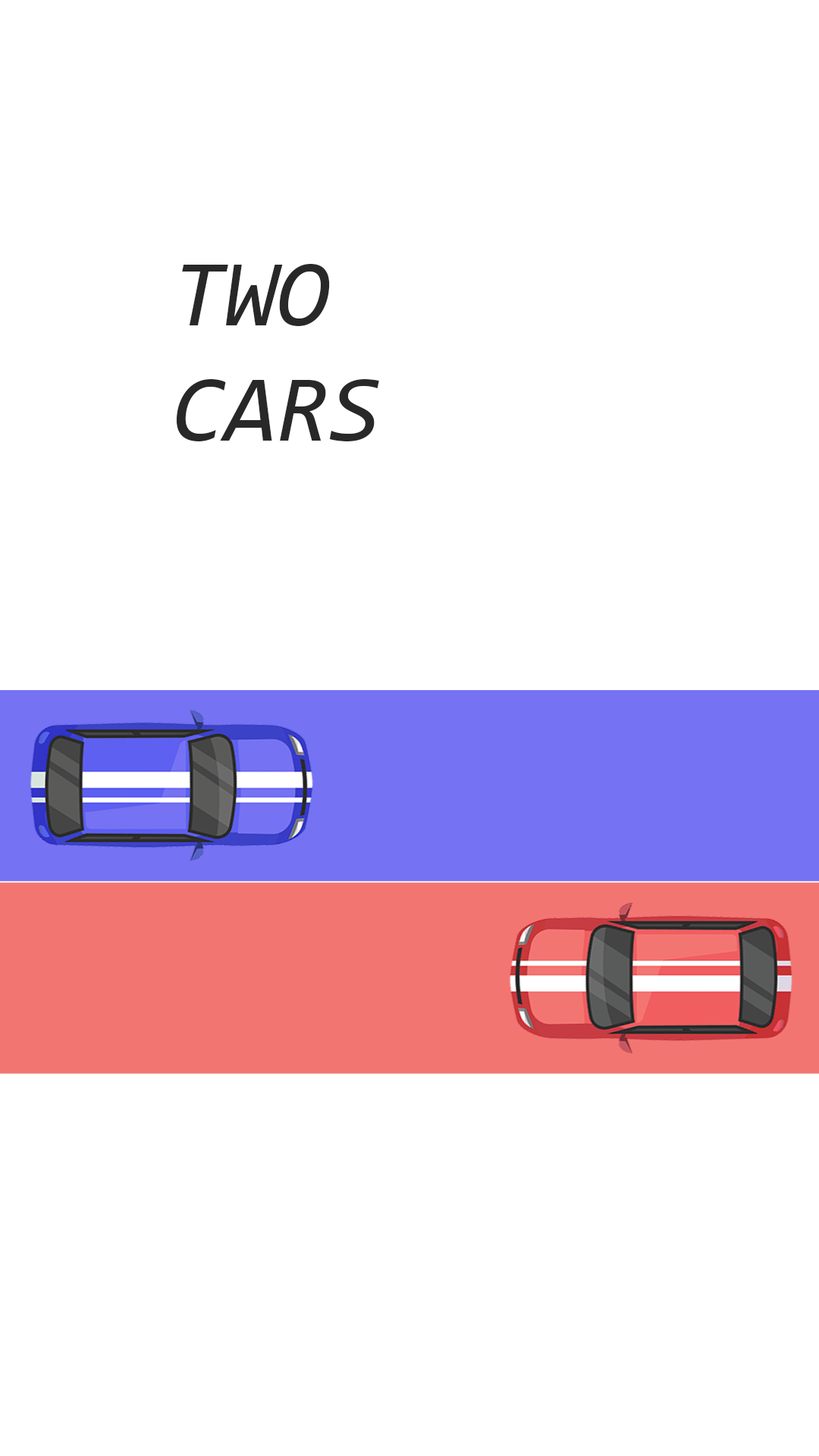
<style>
.page{position:relative;width:819px;height:1456px;background:#ffffff}
.page>*{position:absolute;margin:0}
.t1{font:95.5px "Consolas-Italic";color:#282828}
</style>
<div class="page">
<p class="t1" style="left:176px;top:264px;width:203px;height:177px">TWO <br>CARS</p>
</div>
